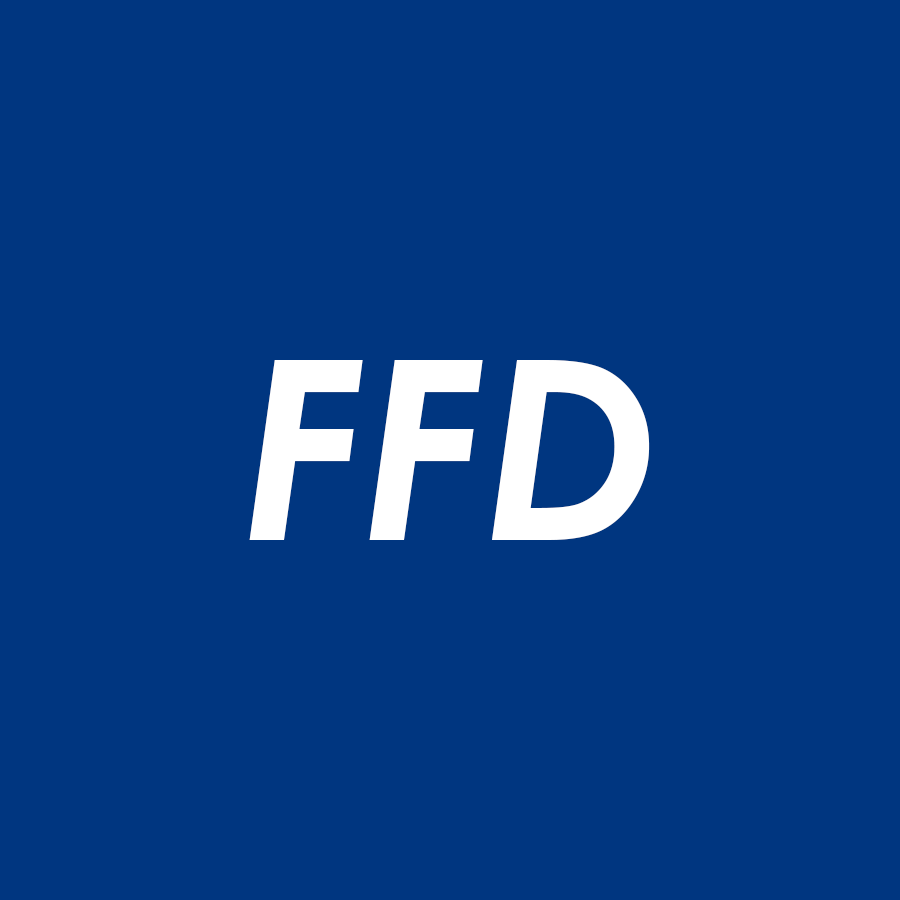
<style>
.page{position:relative;width:900px;height:900px;background:#003680}
.page>*{position:absolute;margin:0}
.t1{font:250px "CenturyGothic-BoldItalic";color:#ffffff}
</style>
<div class="page">
<p class="t1" style="left:249px;top:360px;width:401px;height:180px">FFD</p>
</div>
